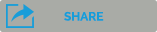
<style>
.page{position:relative;width:157px;height:32px;background:#a9aba6}
.page>*{position:absolute;margin:0}
.t1{font:12px "Raleway-Bold";color:#189dd9;text-transform:uppercase}
</style>
<div class="page">
<p class="t1" style="left:64px;top:11px;width:40px;height:10px">Share</p>
</div>
